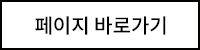
<style>
.page{position:relative;width:200px;height:50px;background:#ffffff}
.page>*{position:absolute;margin:0}
.t1{font:20px "NotoSansKR-Medium";color:#000000}
</style>
<div class="page">
<p class="t1" style="left:35px;top:16px;width:131px;height:19px">페이지 바로가기</p>
</div>
